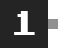
<style>
.page{position:relative;width:58px;height:48px;background:#242424}
.page>*{position:absolute;margin:0}
.t1{font:48px "8bitemul8r";color:#ffffff}
</style>
<div class="page">
<p class="t1" style="left:14px;top:11px;width:21px;height:24px">1</p>
</div>
